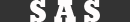
<style>
.page{position:relative;width:130px;height:22px;background:#333333}
.page>*{position:absolute;margin:0}
.t1{font:32.3px "Rockwell-ExtraBold";color:#fefcfc;scale:0.89 1}
</style>
<div class="page">
<p class="t1" style="left:30px;top:0px;width:70px;height:22px">S A S</p>
</div>
